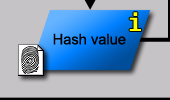
<style>
.page{position:relative;width:170px;height:100px;background:#c6c3c6}
.page>*{position:absolute;margin:0}
.t1{font:24px "Fixedsys";color:#ffff00}
.t2{font:14.7px "ArialMT";color:#000000}
</style>
<div class="page">
<p class="t1" style="left:129px;top:12px;width:12px;height:19px">i</p>
<p class="t2" style="left:53px;top:33px;width:73px;height:12px">Hash value</p>
</div>
